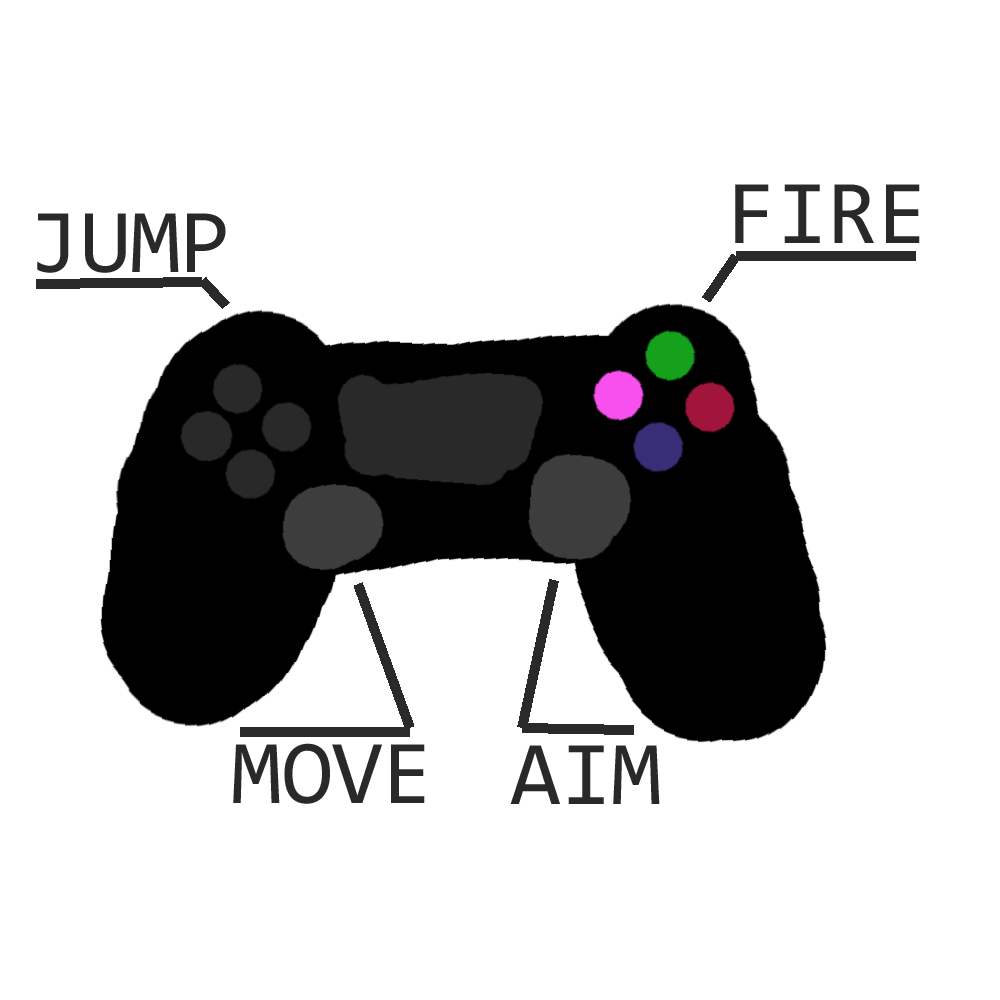
<style>
.page{position:relative;width:1000px;height:1000px;background:#ffffff}
.page>*{position:absolute;margin:0}
.t1{font:91.7px "Consolas";color:#292929}
</style>
<div class="page">
<p class="t1" style="left:735px;top:184px;width:185px;height:59px">FIRE</p>
<p class="t1" style="left:37px;top:213px;width:189px;height:60px">JUMP</p>
<p class="t1" style="left:233px;top:743px;width:192px;height:61px">MOVE</p>
<p class="t1" style="left:510px;top:745px;width:150px;height:59px">AIM</p>
</div>
